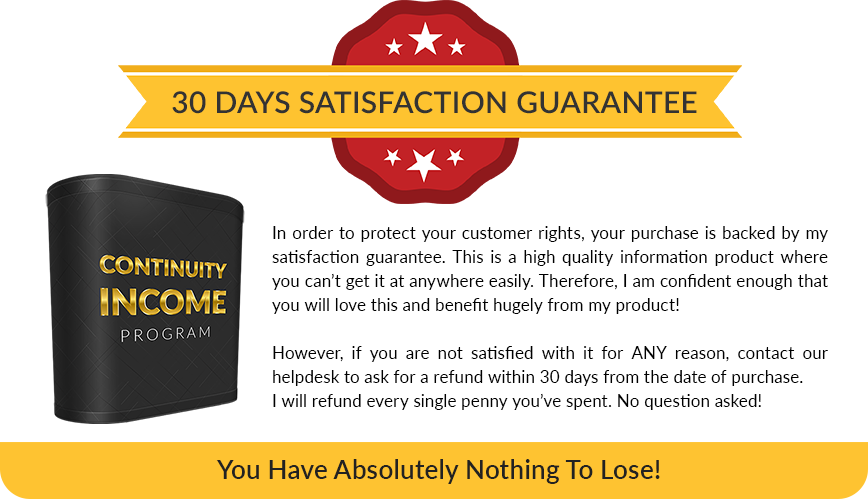
<style>
.page{position:relative;width:868px;height:499px;background:#ffffff}
.page>*{position:absolute;margin:0}
.t1{font:30px "Lato-Semibold";letter-spacing:0.01em;color:#333333}
.t2{font:17px/24px "Lato-Regular";letter-spacing:0.01em;color:#000000}
.t3{font:26px "Lato-Semibold";letter-spacing:0.01em;color:#222222}
</style>
<div class="page">
<p class="t1" style="left:172px;top:91px;width:525px;height:23px">30 DAYS SATISFACTION GUARANTEE</p>
<p class="t2" style="left:272px;top:226px;width:556px;height:184px;text-align:justify">In order to protect your customer rights, your purchase is backed by my satisfaction guarantee. This is a high quality information product where you can’t get it at anywhere easily. Therefore, I am confident enough that you will love this and benefit hugely from my product! <br><br>However, if you are not satisfied with it for ANY reason, contact our helpdesk to ask for a refund within 30 days from the date of purchase. <br>I will refund every single penny you’ve spent. No question asked!<br>I will return every single cent you have spent on this.</p>
<p class="t3" style="left:216px;top:459px;width:444px;height:25px">You Have Absolutely Nothing To Lose!</p>
</div>
